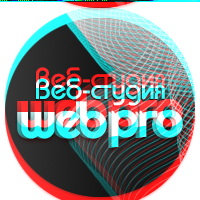
<style>
.page{position:relative;width:200px;height:200px;background:#ffffff}
.page>*{position:absolute;margin:0}
.t1{font:28px "SoftLineExtra";letter-spacing:-0.01em}
.t2{font:50px "Righteous-Regular";letter-spacing:-0.05em}
</style>
<div class="page">
<p class="t1" style="left:36px;top:65px;width:129px;height:28px">Веб-студия</p>
<p class="t1" style="left:35px;top:66px;width:130px;height:28px">Веб-студия</p>
<p class="t2" style="left:17px;top:88px;width:86px;height:38px">web</p>
<p class="t2" style="left:21px;top:88px;width:86px;height:38px">web</p>
<p class="t2" style="left:108px;top:97px;width:71px;height:38px">pro</p>
<p class="t2" style="left:111px;top:96px;width:72px;height:38px">pro</p>
</div>
